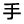
<style>
.page{position:relative;width:24px;height:24px;background:#ffffff}
.page>*{position:absolute;margin:0}
.t1{font:18px "MicrosoftYaHei";color:#000000}
</style>
<div class="page">
<p class="t1" style="left:3px;top:3px;width:18px;height:17px">手</p>
</div>
